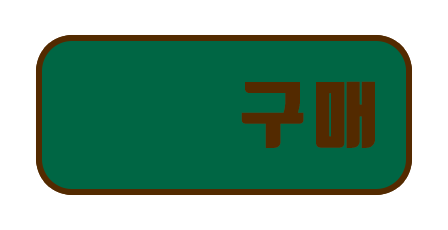
<style>
.page{position:relative;width:448px;height:230px;background:#006644}
.page>*{position:absolute;margin:0}
.t1{font:72px "TmonMonsoriBlack";letter-spacing:0.1em;color:#532a00}
</style>
<div class="page">
<p class="t1" style="left:241px;top:81px;width:134px;height:67px">구매</p>
</div>
